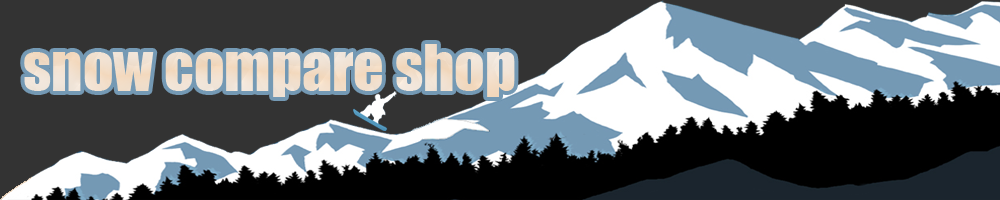
<style>
.page{position:relative;width:1000px;height:200px;background:#333333}
.page>*{position:absolute;margin:0}
.t1{font:60px "Impact";color:#f1dfcc}
</style>
<div class="page">
<p class="t1" style="left:24px;top:44px;width:491px;height:53px">snow compare shop</p>
</div>
